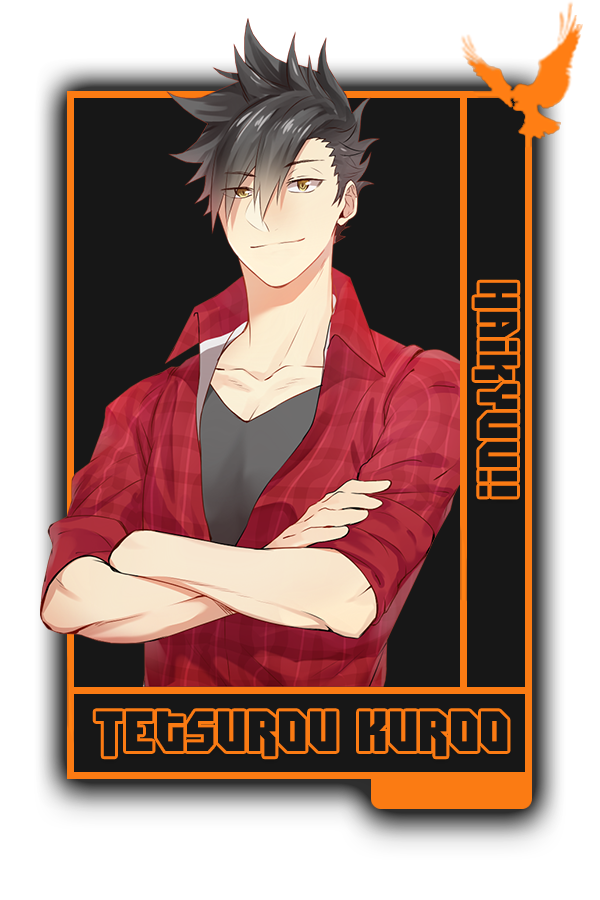
<style>
.page{position:relative;width:600px;height:900px;background:#171717}
.page>*{position:absolute;margin:0}
.t1{font:53.7px "Dimitri";color:#171717}
.t2{font:56.5px "Dimitri";color:#171717}
</style>
<div class="page">
<p class="t1" style="left:474px;top:282px;width:44px;height:215px;rotate:90deg">Haikyuu!!</p>
<p class="t2" style="left:95px;top:711px;width:413px;height:46px">Tetsurou Kuroo</p>
</div>
